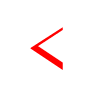
<style>
.page{position:relative;width:100px;height:100px;background:#ffffff}
.page>*{position:absolute;margin:0}
.t1{font:78px "RageItalic";color:#ff0000}
</style>
<div class="page">
<p class="t1" style="left:30px;top:27px;width:33px;height:43px">&lt;</p>
</div>
